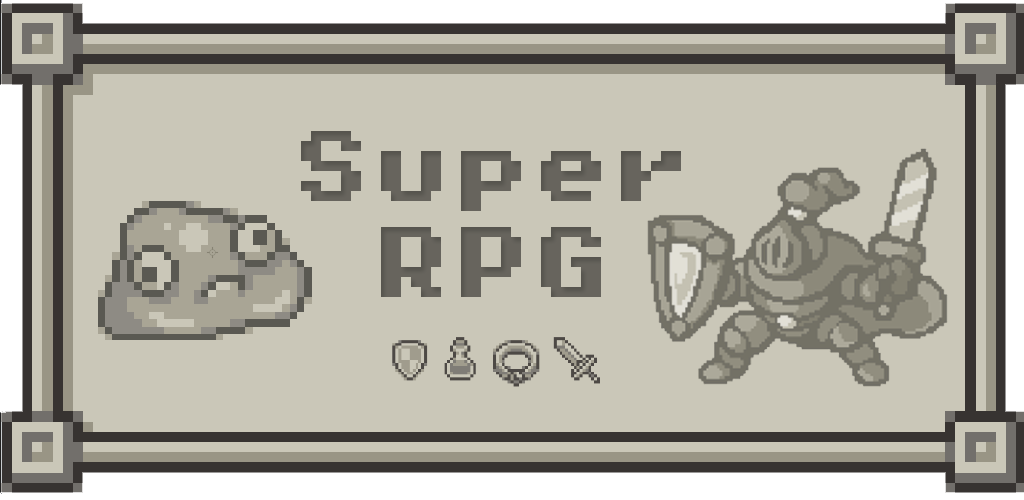
<style>
.page{position:relative;width:1024px;height:500px;background:#cac7b8}
.page>*{position:absolute;margin:0}
.t1{font:80px "PixelOperatorMono8-Bold";color:#66645d}
</style>
<div class="page">
<p class="t1" style="left:301px;top:131px;width:380px;height:166px;text-align:center">Super<br>RPG</p>
</div>
